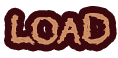
<style>
.page{position:relative;width:118px;height:58px;background:#3b080d}
.page>*{position:absolute;margin:0}
.t1{font:40px "TOBACCO";color:#c4845a;font-weight:bold}
</style>
<div class="page">
<p class="t1" style="left:11px;top:13px;width:99px;height:32px">LOAD</p>
</div>
